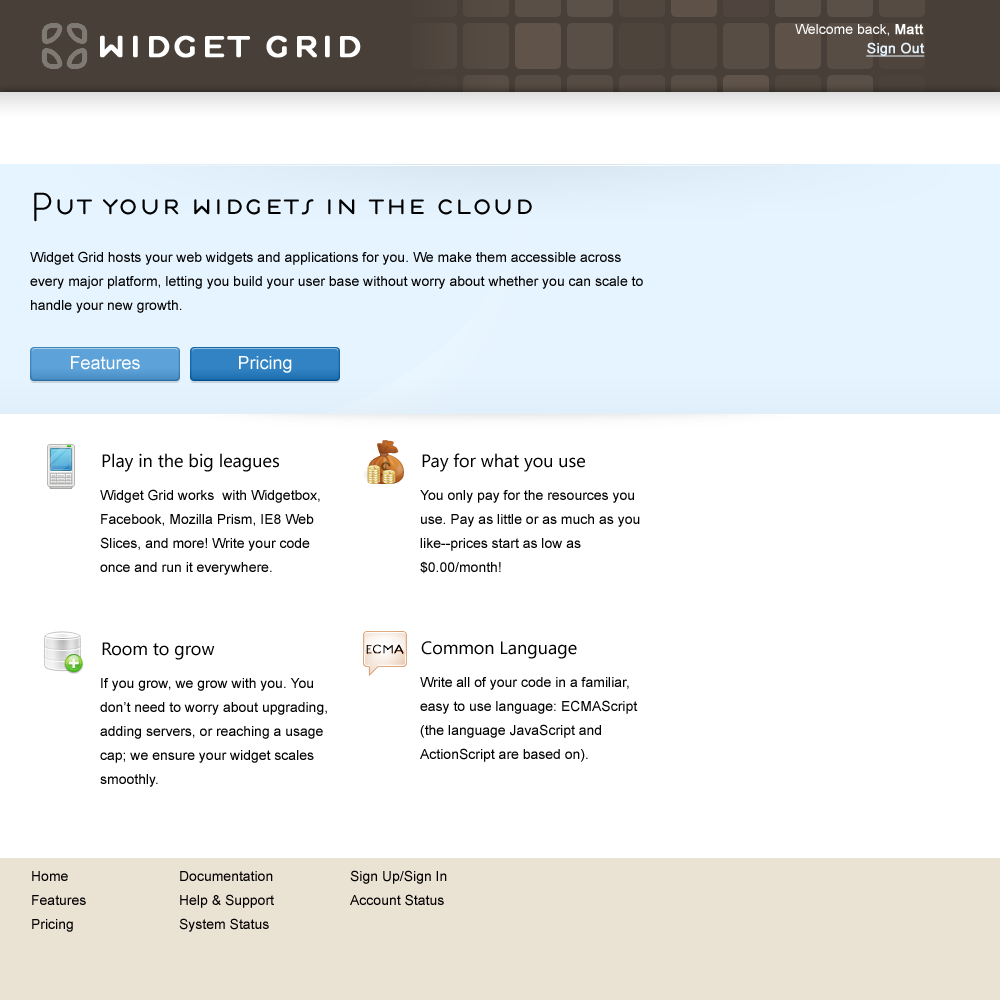
<style>
.page{position:relative;width:1000px;height:1000px;background:#ffffff}
.page>*{position:absolute;margin:0}
.t1{font:14px "ArialMT";color:#ffffff}
.t2{font:14px "ArialMT";color:#ffffff;font-weight:bold}
.t3{font:60px "Estilo";letter-spacing:-0.02em;color:#ffffff;font-weight:bold}
.t4{font:14px "ArialMT";color:#e4f2fd;font-weight:bold;text-decoration:underline}
.t5{font:43px "Estilo";color:#000000}
.t6{font:14px/24px "ArialMT";color:#000000}
.t7{font:18px "ArialMT";color:#ffffff}
.t8{font:18px "SegoeUI";color:#000000}
</style>
<div class="page">
<p class="t1" style="left:795px;top:24px;width:129px;height:12px">Welcome back, <span class="t2">Matt</span></p>
<p class="t3" style="left:100px;top:35px;width:261px;height:23px">widget grid</p>
<p class="t4" style="left:866px;top:42px;width:59px;height:15px">Sign Out</p>
<p class="t5" style="left:34px;top:192px;width:498px;height:30px">Put your widgets in the cloud</p>
<p class="t6" style="left:30px;top:251px;width:613px;height:62px">Widget Grid hosts your web widgets and applications for you. We make them accessible across every major platform, letting you build your user base without worry about whether you can scale to handle your new growth.</p>
<p class="t7" style="left:71px;top:356px;width:69px;height:14px">Features</p>
<p class="t7" style="left:239px;top:356px;width:53px;height:17px">Pricing</p>
<p class="t8" style="left:102px;top:453px;width:177px;height:19px">Play in the big leagues</p>
<p class="t8" style="left:422px;top:453px;width:163px;height:19px">Pay for what you use</p>
<p class="t6" style="left:100px;top:489px;width:220px;height:86px">Widget Grid works  with Widgetbox, Facebook, Mozilla Prism, IE8 Web Slices, and more! Write your code once and run it everywhere.</p>
<p class="t6" style="left:420px;top:490px;width:220px;height:84px">You only pay for the resources you use. Pay as little or as much as you like--prices start as low as $0.00/month!</p>
<p class="t8" style="left:421px;top:641px;width:156px;height:18px">Common Language</p>
<p class="t8" style="left:102px;top:642px;width:113px;height:18px">Room to grow</p>
<p class="t6" style="left:100px;top:678px;width:227px;height:109px">If you grow, we grow with you. You don’t need to worry about upgrading, adding servers, or reaching a usage cap; we ensure your widget scales smoothly.</p>
<p class="t6" style="left:420px;top:677px;width:218px;height:85px">Write all of your code in a familiar, easy to use language: ECMAScript (the language JavaScript and ActionScript are based on).</p>
<p class="t6" style="left:350px;top:870px;width:97px;height:36px">Sign Up/Sign In<br>Account Status</p>
<p class="t6" style="left:32px;top:871px;width:54px;height:61px">Home<br>Features<br>Pricing</p>
<p class="t6" style="left:179px;top:871px;width:95px;height:61px">Documentation<br>Help &amp; Support<br>System Status</p>
</div>
